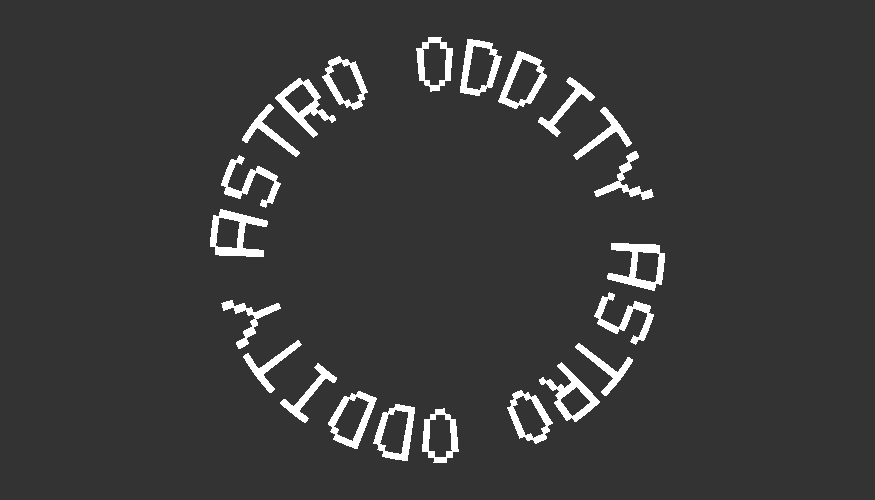
<style>
.page{position:relative;width:875px;height:500px;background:#333333}
.page>*{position:absolute;margin:0}
.t1{font:49.5px "FreePixel-Regular";color:#ffffff}
</style>
<div class="page">
<p class="t1" style="left:210px;top:37px;width:444px;height:220px">ASTRO ODDITY</p>
<p class="t1" style="left:221px;top:243px;width:444px;height:220px;rotate:180deg">ASTRO ODDITY</p>
</div>
